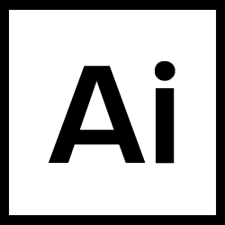
<style>
.page{position:relative;width:225px;height:225px;background:#ffffff}
.page>*{position:absolute;margin:0}
.t1{font:135px "BlueHighway-Regular";color:#000000;scale:1.25 1}
</style>
<div class="page">
<p class="t1" style="left:48px;top:61px;width:128px;height:103px">Ai</p>
</div>
